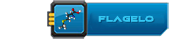
<style>
.page{position:relative;width:169px;height:39px;background:#ffffff}
.page>*{position:absolute;margin:0}
.t1{font:9.6px "elasisrg";letter-spacing:0.025em;color:#32c7f3}
</style>
<div class="page">
<p class="t1" style="left:98px;top:15px;width:56px;height:7px">flagelo</p>
</div>
